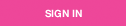
<style>
.page{position:relative;width:126px;height:26px;background:#ee4799}
.page>*{position:absolute;margin:0}
.t1{font:10px "HelveticaNeue-Bold";color:#ffffff}
</style>
<div class="page">
<p class="t1" style="left:45px;top:9px;width:37px;height:9px">SIGN IN</p>
</div>
